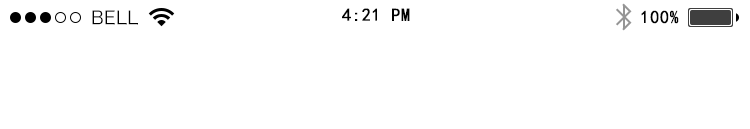
<style>
.page{position:relative;width:750px;height:129px;background:#ffffff}
.page>*{position:absolute;margin:0}
.t1{font:18px "HiraginoSansGB-W3";letter-spacing:0.02em;color:#000000}
.t2{font:18px "SimHei";letter-spacing:0.02em;color:#000000;font-weight:bold}
</style>
<div class="page">
<p class="t1" style="left:92px;top:10px;width:46px;height:15px">BELL</p>
<p class="t2" style="left:342px;top:8px;width:68px;height:13px">4:21 PM</p>
<p class="t2" style="left:641px;top:10px;width:38px;height:14px">100%</p>
</div>
